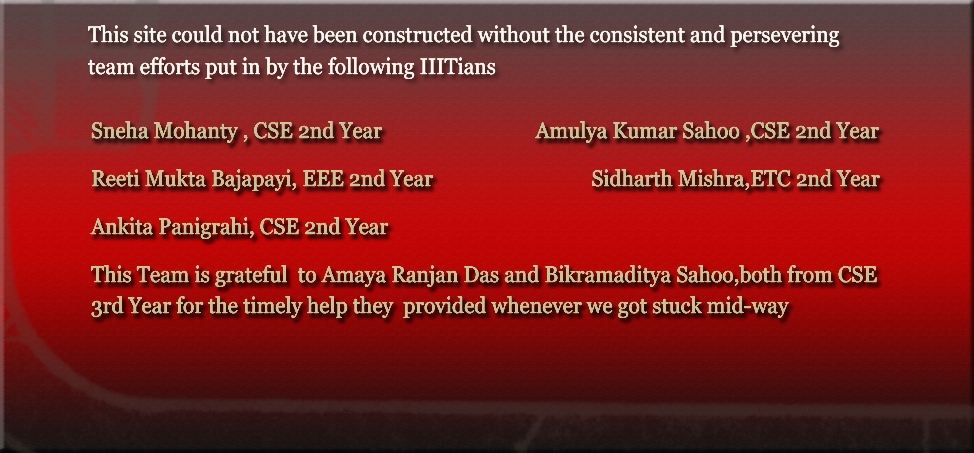
<style>
.page{position:relative;width:974px;height:453px}
.page>*{position:absolute;margin:0}
.t1{font:22.4px/16px "Vani";letter-spacing:0.002em;color:#faf8f8;scale:0.94 1}
.t2{font:22.4px/16px "Vani";letter-spacing:0.002em;color:#c3c395;scale:0.94 1}
</style>
<div class="page">
<p class="t1" style="left:88px;top:25px;width:752px;height:54px;text-align:right">This site could not have been constructed without the consistent and persevering <br><br>team efforts put in by the following IIITians</p>
<p class="t2" style="left:90px;top:121px;width:790px;height:197px;text-align:right">Sneha Mohanty , CSE 2nd Year                              Amulya Kumar Sahoo ,CSE 2nd Year<br><br><br>Reeti Mukta Bajapayi, EEE 2nd Year                               Sidharth Mishra,ETC 2nd Year<br><br><br>Ankita Panigrahi, CSE 2nd Year<br><br><br>This Team is grateful  to Amaya Ranjan Das and Bikramaditya Sahoo,both from CSE <br><br>3rd Year for the timely help they  provided whenever we got stuck mid-way</p>
</div>
